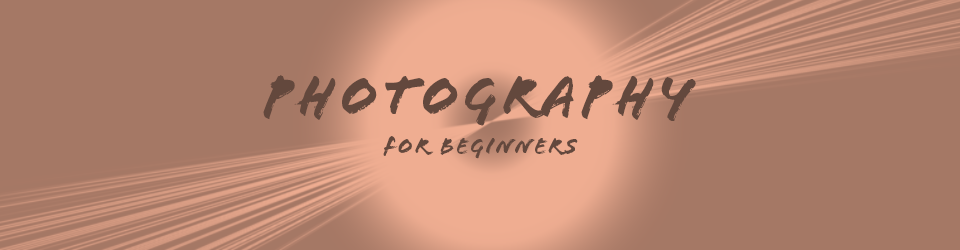
<style>
.page{position:relative;width:960px;height:250px;background:#a57865}
.page>*{position:absolute;margin:0}
.t1{font:60px "FloodStd";letter-spacing:0.08em;color:#63483d;scale:0.97 1}
.t2{font:24px "FloodStd";letter-spacing:0.08em;color:#63483d;scale:0.97 1}
</style>
<div class="page">
<p class="t1" style="left:263px;top:75px;width:433px;height:51px">Photography</p>
<p class="t2" style="left:383px;top:136px;width:195px;height:23px">for beginners</p>
</div>
